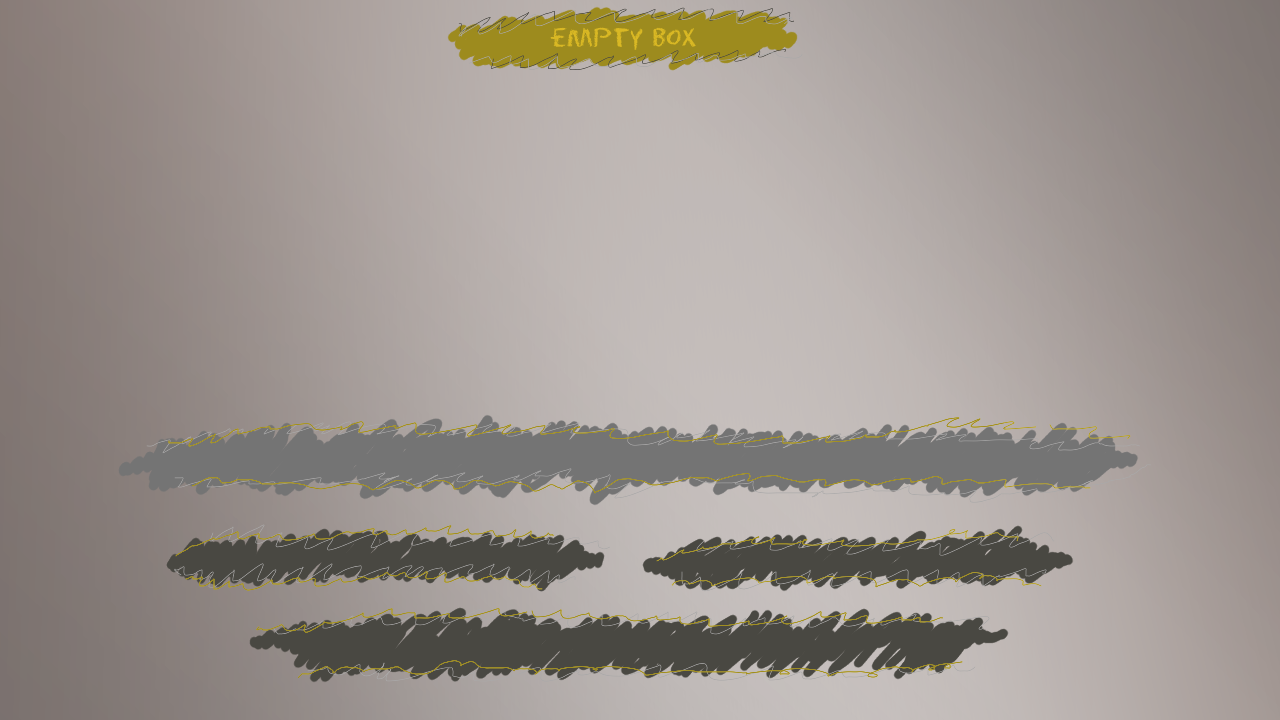
<style>
.page{position:relative;width:1280px;height:720px}
.page>*{position:absolute;margin:0}
.t1{font:24px "Eraser-Regular";color:#d9b824}
</style>
<div class="page">
<p class="t1" style="left:550px;top:27px;width:146px;height:23px">empty box</p>
</div>
